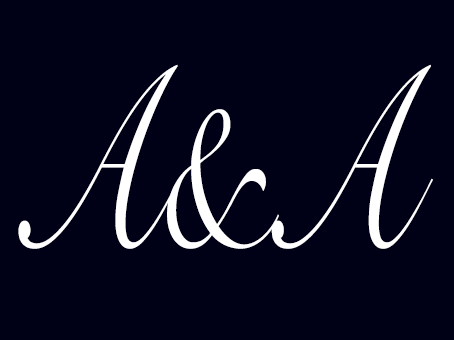
<style>
.page{position:relative;width:454px;height:340px;background:#000016}
.page>*{position:absolute;margin:0}
.t1{font:255px "SnellRoundhand";color:#ffffff;scale:0.64 1}
</style>
<div class="page">
<p class="t1" style="left:18px;top:64px;width:415px;height:185px">A&amp;A</p>
</div>
